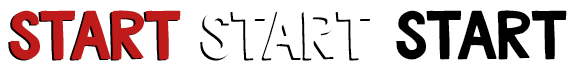
<style>
.page{position:relative;width:579px;height:71px;background:#ffffff}
.page>*{position:absolute;margin:0}
.t1{font:65px "BluberryRegular-Normal";letter-spacing:-0.01em;color:#c01b1b}
.t2{font:65px "BluberryRegular-Normal";letter-spacing:-0.01em;color:#000000}
</style>
<div class="page">
<p class="t1" style="left:8px;top:11px;width:171px;height:50px">START</p>
<p class="t1" style="left:10px;top:10px;width:171px;height:50px">START</p>
<p class="t2" style="left:395px;top:11px;width:171px;height:50px">START</p>
<p class="t2" style="left:396px;top:10px;width:171px;height:50px">START</p>
</div>
